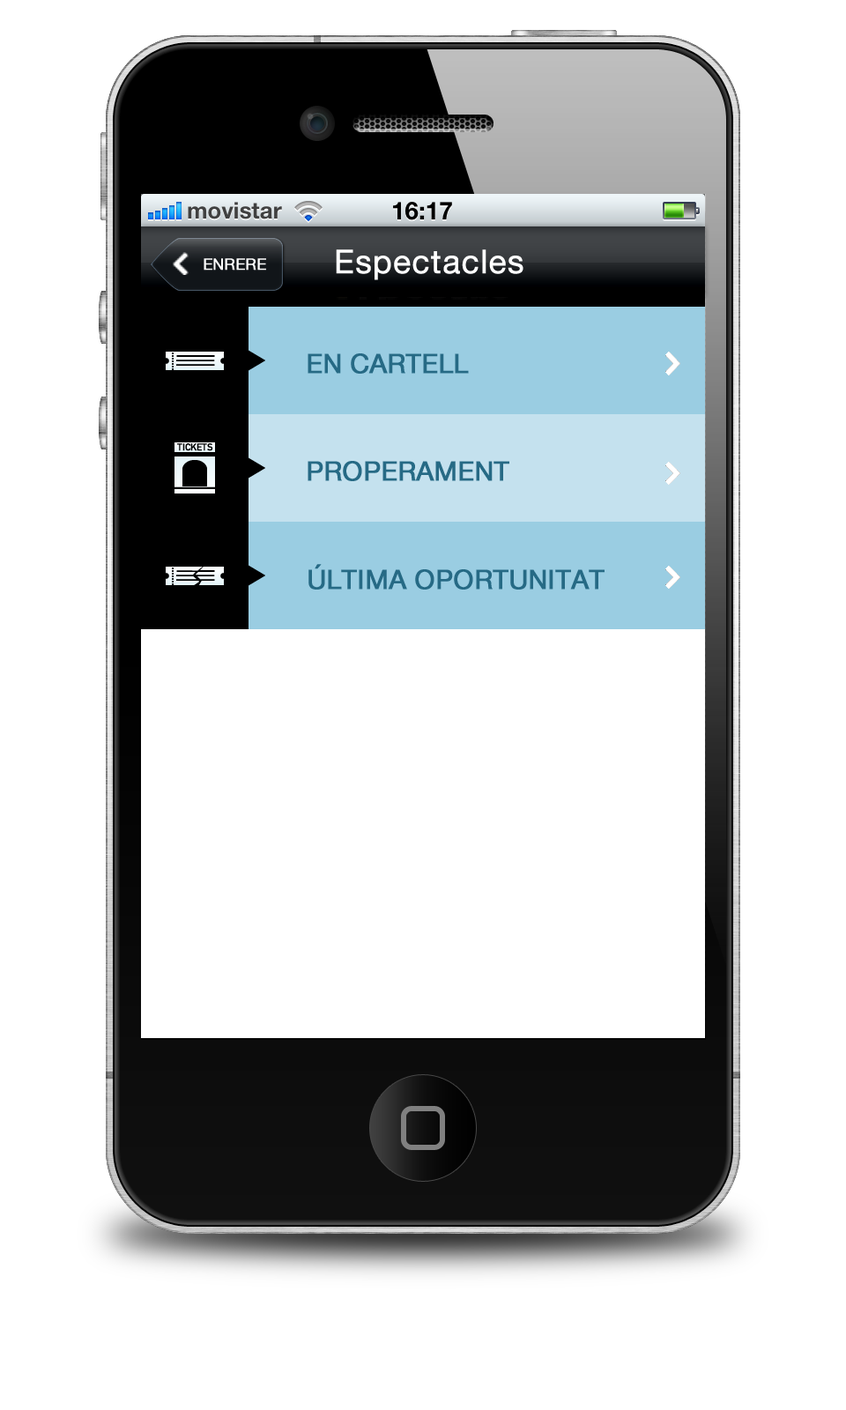
<style>
.page{position:relative;width:846px;height:1410px;background:#ffffff}
.page>*{position:absolute;margin:0}
.t1{font:32.6px "HelveticaNeueLTPro-Roman";letter-spacing:0.011em;color:#ffffff;font-weight:bold}
.t2{font:26.4px "HelveticaNeueLTPro-Roman";color:#266a85;font-weight:bold}
</style>
<div class="page">
<p class="t1" style="left:336px;top:249px;width:187px;height:31px">Espectacles</p>
<p class="t2" style="left:308px;top:353px;width:161px;height:21px">EN CARTELL</p>
<p class="t2" style="left:308px;top:461px;width:201px;height:20px">PROPERAMENT</p>
<p class="t2" style="left:308px;top:564px;width:296px;height:25px">ÚLTIMA OPORTUNITAT</p>
</div>
